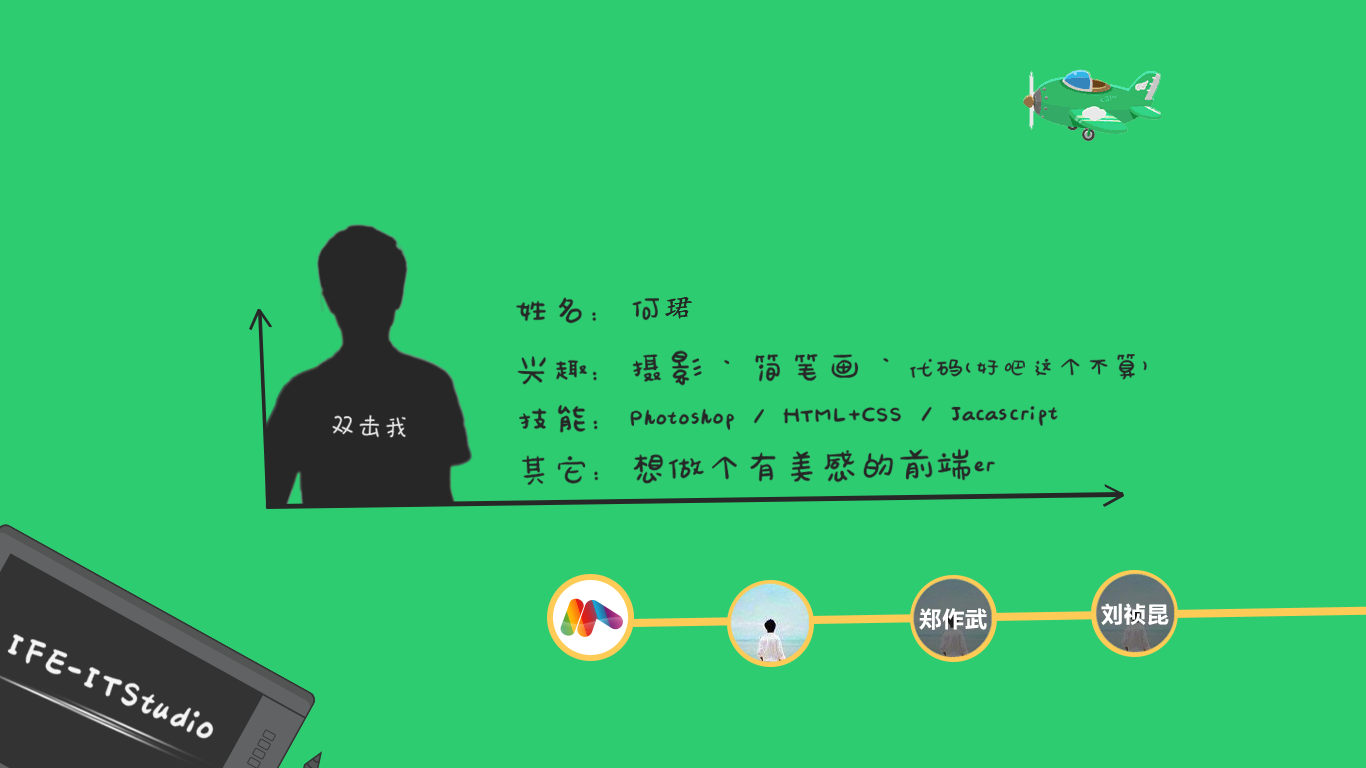
<style>
.page{position:relative;width:1366px;height:768px;background:#2ecc71}
.page>*{position:absolute;margin:0}
.t1{font:41.5px "HYYouRanTiJ";letter-spacing:-0.076em;color:#262626}
.t2{font:28.3px "STKaiti";letter-spacing:-0.076em;color:#262626;font-weight:bold}
.t3{font:30.2px "HYYouRanTiJ";letter-spacing:-0.076em;color:#262626}
.t4{font:28.3px "HYWaiWaiTiJ";letter-spacing:-0.076em;color:#e8e8e8;font-weight:bold}
.t5{font:22px "MicrosoftYaHei-Bold";letter-spacing:0.04em;color:#ffffff}
.t6{font:70.3px "HYYouRanTiJ";letter-spacing:-0.076em;color:#ffffff;scale:0.9 1}
</style>
<div class="page">
<p class="t1" style="left:516px;top:297px;width:143px;height:27px;rotate:-1deg">姓名：何</p>
<p class="t2" style="left:665px;top:297px;width:27px;height:22px">珺</p>
<p class="t2" style="left:665px;top:297px;width:27px;height:22px">珺</p>
<p class="t1" style="left:517px;top:350px;width:631px;height:36px;rotate:-1deg">兴趣：摄影 ` 简笔画 ` <span class="t3">代码(好吧这个不算)</span></p>
<p class="t4" style="left:332px;top:414px;width:74px;height:24px;rotate:3deg">双击我</p>
<p class="t1" style="left:519px;top:404px;width:539px;height:29px;rotate:-1deg">技能：Photoshop / HTML+CSS / Jacascript</p>
<p class="t1" style="left:521px;top:448px;width:474px;height:38px;rotate:-1deg">其它：想做个有美感的前端er</p>
<p class="t5" style="left:1101px;top:603px;width:68px;height:22px">刘祯昆</p>
<p class="t5" style="left:919px;top:608px;width:68px;height:22px">郑作武</p>
<p class="t6" style="left:7px;top:633px;width:207px;height:107px;rotate:23deg;opacity:0.95">IFE-ITStudio</p>
</div>
